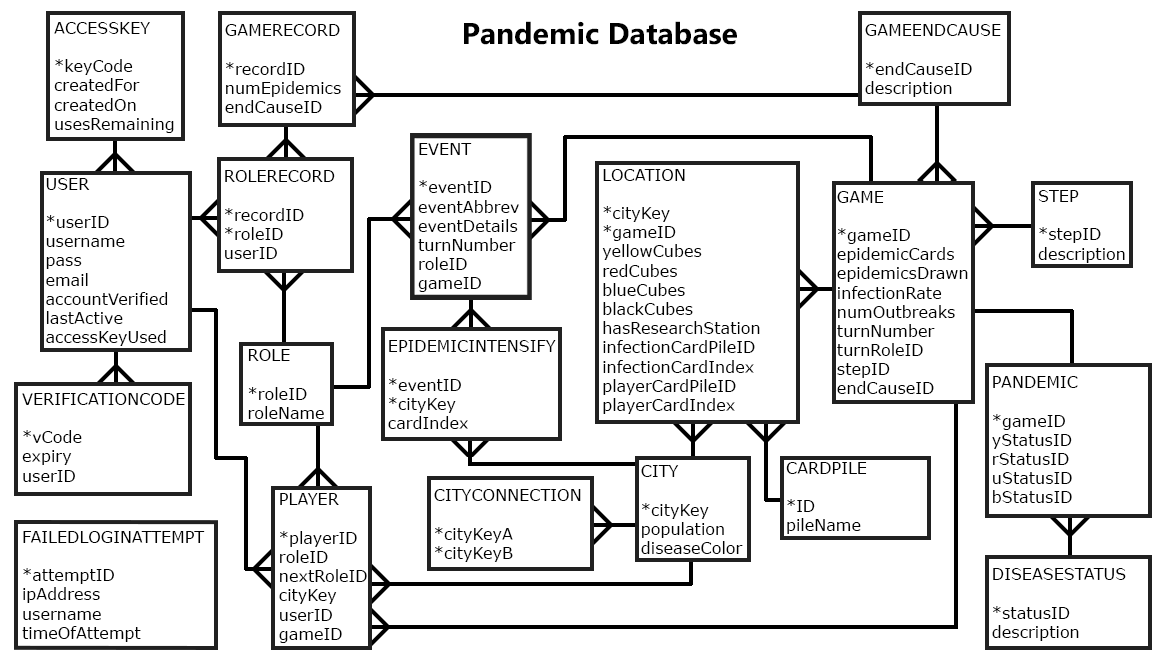
<style>
.page{position:relative;width:1162px;height:659px;background:#ffffff}
.page>*{position:absolute;margin:0}
.t1{font:16px "Verdana";color:#000000}
.t2{font:30px "MicrosoftPhagsPa-Bold";color:#000000}
</style>
<div class="page">
<p class="t1" style="left:54px;top:22px;width:120px;height:111px">ACCESSKEY<br><br>*keyCode<br>createdFor<br>createdOn<br>usesRemaining</p>
<p class="t1" style="left:225px;top:24px;width:116px;height:89px">GAMERECORD<br><br>*recordID<br>numEpidemics<br>endCauseID</p>
<p class="t2" style="left:464px;top:21px;width:273px;height:24px">Pandemic Database</p>
<p class="t1" style="left:865px;top:24px;width:136px;height:73px">GAMEENDCAUSE<br><br>*endCauseID<br>description</p>
<p class="t1" style="left:418px;top:143px;width:101px;height:149px">EVENT<br><br>*eventID<br>eventAbbrev<br>eventDetails<br>turnNumber<br>roleID<br>gameID</p>
<p class="t1" style="left:225px;top:170px;width:110px;height:89px">ROLERECORD<br><br>*recordID<br>*roleID<br>userID</p>
<p class="t1" style="left:602px;top:169px;width:158px;height:245px">LOCATION<br><br>*cityKey<br>*gameID<br>yellowCubes<br>redCubes<br>blueCubes<br>blackCubes<br>hasResearchStation<br>infectionCardPileID<br>infectionCardIndex<br>playerCardPileID<br>playerCardIndex</p>
<p class="t1" style="left:46px;top:178px;width:122px;height:168px">USER<br><br>*userID<br>username<br>pass<br>email<br>accountVerified<br>lastActive<br>accessKeyUsed</p>
<p class="t1" style="left:837px;top:191px;width:131px;height:203px">GAME<br><br>*gameID<br>epidemicCards<br>epidemicsDrawn<br>infectionRate<br>numOutbreaks<br>turnNumber<br>turnRoleID<br>stepID<br>endCauseID</p>
<p class="t1" style="left:1038px;top:190px;width:87px;height:73px">STEP<br><br>*stepID<br>description</p>
<p class="t1" style="left:388px;top:340px;width:168px;height:89px">EPIDEMICINTENSIFY<br><br>*eventID<br>*cityKey<br>cardIndex</p>
<p class="t1" style="left:248px;top:349px;width:76px;height:70px">ROLE<br><br>*roleID<br>roleName</p>
<p class="t1" style="left:992px;top:376px;width:86px;height:127px">PANDEMIC<br><br>*gameID<br>yStatusID<br>rStatusID<br>uStatusID<br>bStatusID</p>
<p class="t1" style="left:22px;top:393px;width:163px;height:89px">VERIFICATIONCODE<br><br>*vCode<br>expiry<br>userID</p>
<p class="t1" style="left:786px;top:462px;width:81px;height:72px">CARDPILE<br><br>*ID<br>pileName</p>
<p class="t1" style="left:641px;top:465px;width:102px;height:89px">CITY<br><br>*cityKey<br>population<br>diseaseColor</p>
<p class="t1" style="left:279px;top:493px;width:88px;height:150px">PLAYER<br><br>*playerID<br>roleID<br>nextRoleID<br>cityKey<br>userID<br>gameID</p>
<p class="t1" style="left:434px;top:489px;width:147px;height:73px">CITYCONNECTION<br><br>*cityKeyA<br>*cityKeyB</p>
<p class="t1" style="left:22px;top:531px;width:183px;height:111px">FAILEDLOGINATTEMPT<br><br>*attemptID<br>ipAddress<br>username<br>timeOfAttempt</p>
<p class="t1" style="left:992px;top:568px;width:134px;height:73px">DISEASESTATUS<br><br>*statusID<br>description</p>
</div>
